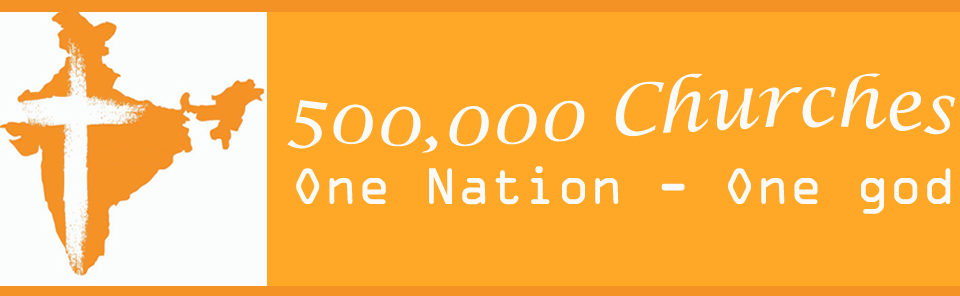
<style>
.page{position:relative;width:960px;height:296px;background:#ffa827}
.page>*{position:absolute;margin:0}
.t1{font:72px "LucidaCalligraphy-Italic";color:#fafaf9}
.t2{font:55px "OCRAExtended";color:#fafaf9}
</style>
<div class="page">
<p class="t1" style="left:287px;top:73px;width:668px;height:80px">500,000 Churches</p>
<p class="t2" style="left:296px;top:166px;width:655px;height:48px">One Nation - One god</p>
</div>
